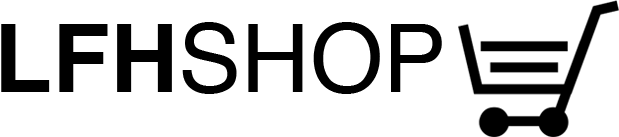
<style>
.page{position:relative;width:619px;height:137px;background:#ffffff}
.page>*{position:absolute;margin:0}
.t1{font:94.8px "Helvetica";color:#000000}
.t2{font:94.8px "Helvetica-Bold";color:#000000}
</style>
<div class="page">
<p class="t1" style="left:1px;top:22px;width:441px;height:72px"><span class="t2">LFH</span>SHOP</p>
</div>
